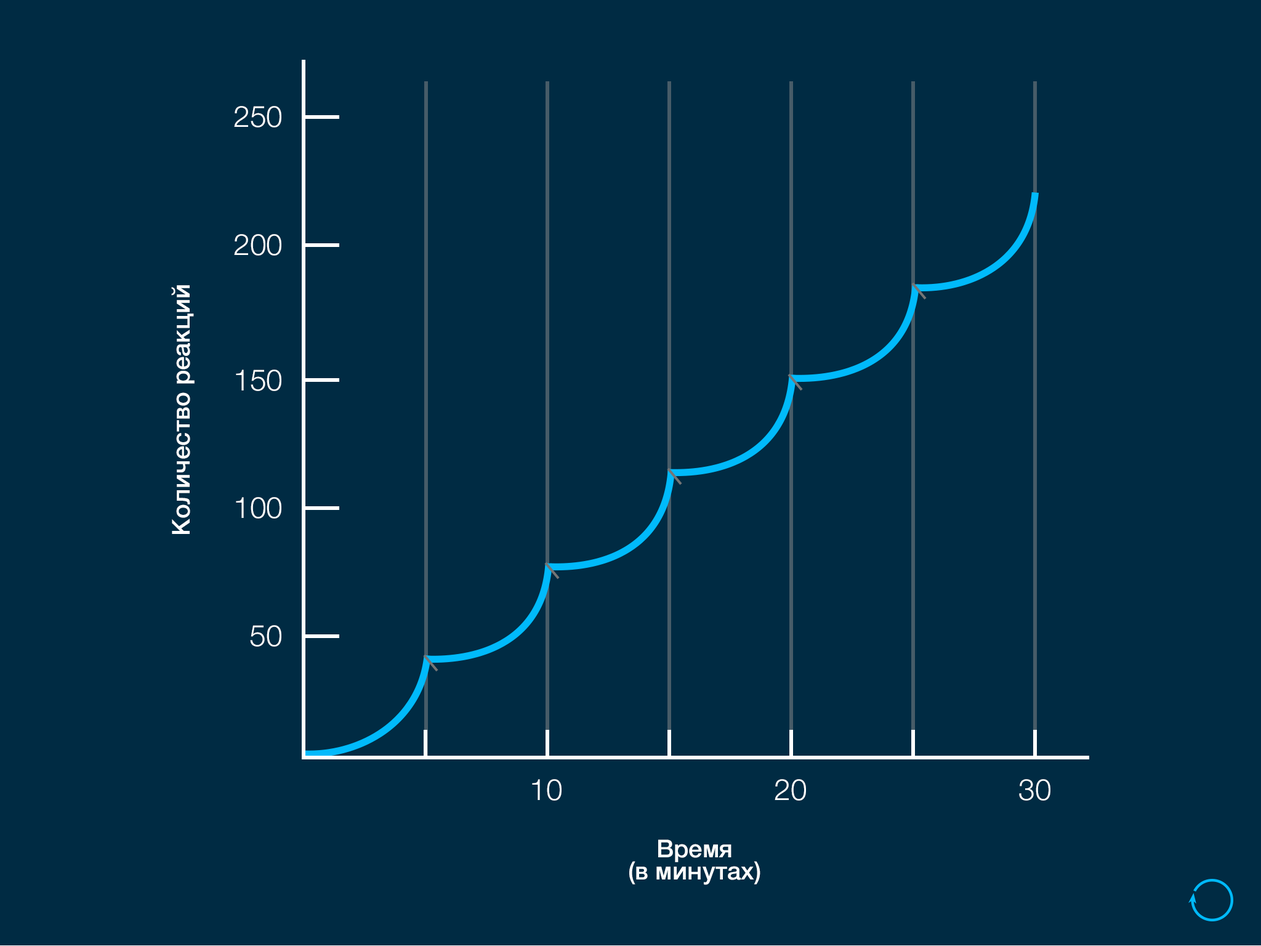
<style>
.page{position:relative;width:1261px;height:946px;background:#002b43}
.page>*{position:absolute;margin:0}
.t1{font:29.6px "HelveticaNeue-Light";color:#ffffff}
.t2{font:24.6px "HelveticaNeue-Medium";color:#ffffff}
.t3{font:24.6px/22.2px "HelveticaNeue-Medium";color:#ffffff}
</style>
<div class="page">
<p class="t1" style="left:234px;top:106px;width:47px;height:21px">250</p>
<p class="t1" style="left:234px;top:234px;width:47px;height:22px">200</p>
<p class="t2" style="left:171px;top:285px;width:24px;height:249px;rotate:-90deg">Количество реакций</p>
<p class="t1" style="left:236px;top:369px;width:45px;height:22px">150</p>
<p class="t1" style="left:236px;top:497px;width:45px;height:21px">100</p>
<p class="t1" style="left:250px;top:625px;width:31px;height:21px">50</p>
<p class="t1" style="left:532px;top:779px;width:30px;height:21px">10</p>
<p class="t1" style="left:775px;top:779px;width:31px;height:21px">20</p>
<p class="t1" style="left:1019px;top:779px;width:31px;height:21px">30</p>
<p class="t3" style="left:629px;top:839px;width:131px;height:46px;text-align:center">Время<br>(в минутах)</p>
</div>
